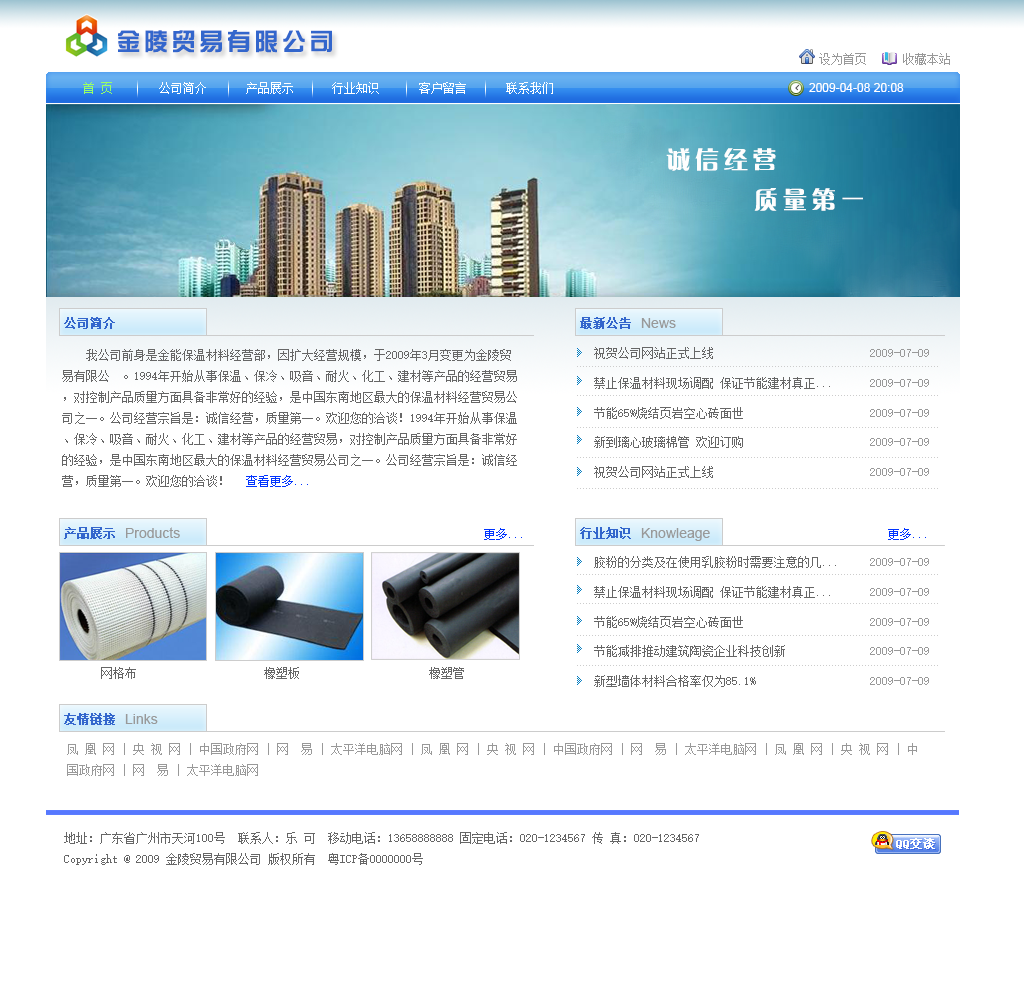
<style>
.page{position:relative;width:1024px;height:1000px;background:#ffffff}
.page>*{position:absolute;margin:0}
.t1{font:24px "HYk1gj";letter-spacing:0.15em;color:#3366cc}
.t2{font:12px "SimSun";color:#999999}
.t3{font:12px "SimSun";color:#99ff66}
.t4{font:12px "SimSun";color:#ffffff}
.t5{font:12px "ArialMT";color:#ffffff}
.t6{font:24px "FZCQJW--GB1-0";letter-spacing:0.2em;color:#fefefe}
.t7{font:12px "SimSun";color:#3366cc;font-weight:bold}
.t8{font:14px "ArialMT";color:#999999}
.t9{font:12px "SimSun";color:#666666}
.t10{font:12px "SimSun";color:#666666;text-transform:uppercase}
.t11{font:12px "SimSun";color:#999999;text-transform:uppercase}
.t12{font:12px "SimSun";color:#0033ff;text-transform:uppercase}
</style>
<div class="page">
<p class="t1" style="left:118px;top:30px;width:214px;height:23px">金陵贸易有限公司</p>
<p class="t2" style="left:819px;top:53px;width:47px;height:12px">设为首页</p>
<p class="t2" style="left:903px;top:53px;width:47px;height:12px">收藏本站</p>
<p class="t3" style="left:83px;top:82px;width:29px;height:12px">首 页</p>
<p class="t4" style="left:159px;top:82px;width:47px;height:12px">公司简介</p>
<p class="t4" style="left:246px;top:82px;width:47px;height:12px">产品展示</p>
<p class="t4" style="left:332px;top:82px;width:47px;height:12px">行业知识</p>
<p class="t4" style="left:419px;top:82px;width:47px;height:12px">客户留言</p>
<p class="t4" style="left:506px;top:82px;width:47px;height:12px">联系我们</p>
<p class="t5" style="left:809px;top:83px;width:95px;height:9px">2009-04-08 20:08</p>
<p class="t6" style="left:666px;top:148px;width:110px;height:23px">诚信经营</p>
<p class="t6" style="left:754px;top:188px;width:109px;height:23px">质量第一</p>
<p class="t7" style="left:64px;top:317px;width:51px;height:12px">公司简介</p>
<p class="t7" style="left:580px;top:317px;width:51px;height:12px">最新公告</p>
<p class="t8" style="left:641px;top:318px;width:35px;height:10px">News</p>
<p class="t9" style="left:62px;top:349px;width:455px;height:138px">我公司前身是金能保温材料经营部，因扩大经营规模，于2009年3月变更为金陵贸易有限公 。1994年开始从事保温、保冷、吸音、耐火、化工、建材等产品的经营贸易，对控制产品质量方面具备非常好的经验，是中国东南地区最大的保温材料经营贸易公司之一。公司经营宗旨是：诚信经营，质量第一。欢迎您的洽谈！1994年开始从事保温、保冷、吸音、耐火、化工、建材等产品的经营贸易，对控制产品质量方面具备非常好的经验，是中国东南地区最大的保温材料经营贸易公司之一。公司经营宗旨是：诚信经营，质量第一。欢迎您的洽谈！</p>
<p class="t10" style="left:594px;top:347px;width:335px;height:12px">祝贺公司网站正式上线                          <span class="t11">2009-07-09</span></p>
<p class="t10" style="left:594px;top:377px;width:335px;height:12px">禁止保温材料现场调配 保证节能建材真正...      <span class="t11">2009-07-09</span></p>
<p class="t10" style="left:594px;top:407px;width:335px;height:12px">节能65%烧结页岩空心砖面世                     <span class="t11">2009-07-09</span></p>
<p class="t10" style="left:594px;top:436px;width:335px;height:12px">新到璃心玻璃棉管 欢迎订购                     <span class="t11">2009-07-09</span></p>
<p class="t10" style="left:594px;top:466px;width:335px;height:12px">祝贺公司网站正式上线                          <span class="t11">2009-07-09</span></p>
<p class="t12" style="left:246px;top:475px;width:62px;height:12px">查看更多...</p>
<p class="t7" style="left:64px;top:527px;width:51px;height:12px">产品展示</p>
<p class="t8" style="left:126px;top:527px;width:54px;height:11px">Products</p>
<p class="t12" style="left:484px;top:528px;width:38px;height:12px">更多...</p>
<p class="t7" style="left:580px;top:527px;width:51px;height:12px">行业知识</p>
<p class="t8" style="left:641px;top:528px;width:69px;height:13px">Knowleage</p>
<p class="t12" style="left:888px;top:528px;width:38px;height:12px">更多...</p>
<p class="t10" style="left:594px;top:556px;width:335px;height:12px">胶粉的分类及在使用乳胶粉时需要注意的几...     <span class="t11">2009-07-09</span></p>
<p class="t10" style="left:594px;top:586px;width:335px;height:12px">禁止保温材料现场调配 保证节能建材真正...      <span class="t11">2009-07-09</span></p>
<p class="t10" style="left:594px;top:616px;width:335px;height:12px">节能65%烧结页岩空心砖面世                     <span class="t11">2009-07-09</span></p>
<p class="t10" style="left:594px;top:645px;width:335px;height:12px">节能减排推动建筑陶瓷企业科技创新              <span class="t11">2009-07-09</span></p>
<p class="t9" style="left:101px;top:667px;width:35px;height:12px">网格布</p>
<p class="t9" style="left:264px;top:667px;width:35px;height:12px">橡塑板</p>
<p class="t9" style="left:429px;top:667px;width:35px;height:12px">橡塑管</p>
<p class="t10" style="left:594px;top:675px;width:335px;height:12px">新型墙体材料合格率仅为85.1%                   <span class="t11">2009-07-09</span></p>
<p class="t7" style="left:64px;top:713px;width:51px;height:12px">友情链接</p>
<p class="t8" style="left:125px;top:714px;width:33px;height:10px">Links</p>
<p class="t2" style="left:67px;top:743px;width:850px;height:33px">凤 凰 网 | 央 视 网 | 中国政府网 | 网　易 | 太平洋电脑网 | 凤 凰 网 | 央 视 网 | 中国政府网 | 网　易 | 太平洋电脑网 | 凤 凰 网 | 央 视 网 | 中国政府网 | 网　易 | 太平洋电脑网</p>
<p class="t9" style="left:64px;top:832px;width:635px;height:33px">地址：广东省广州市天河100号  联系人：乐 可  移动电话：13658888888 固定电话：020-1234567 传 真：020-1234567<br>Copyright @ 2009 金陵贸易有限公司 版权所有  粤ICP备0000000号</p>
</div>
